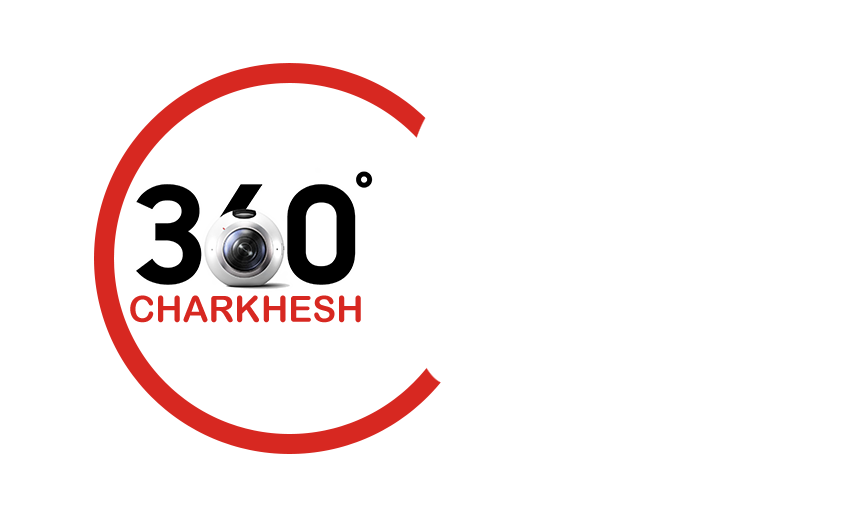
<style>
.page{position:relative;width:842px;height:506px;background:#ffffff}
.page>*{position:absolute;margin:0}
.t1{font:36px "ArialRoundedMTBold";color:#d72821}
</style>
<div class="page">
<p class="t1" style="left:130px;top:295px;width:231px;height:28px">CHARKHESH</p>
</div>
